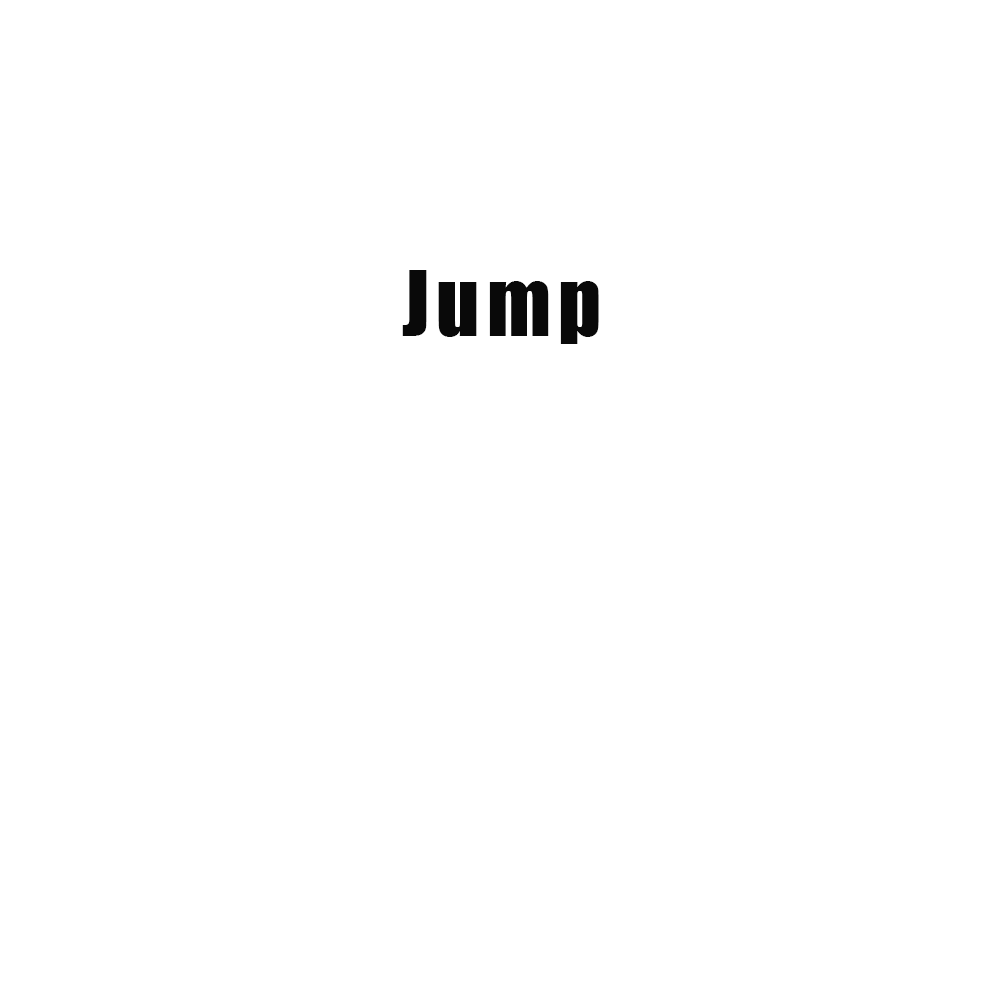
<style>
.page{position:relative;width:1000px;height:1000px;background:#ffffff}
.page>*{position:absolute;margin:0}
.t1{font:83.3px "Impact";letter-spacing:0.085em;color:#090909}
</style>
<div class="page">
<p class="t1" style="left:402px;top:270px;width:197px;height:74px">Jump</p>
</div>
